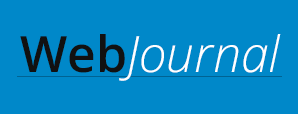
<style>
.page{position:relative;width:298px;height:114px;background:#0088c9}
.page>*{position:absolute;margin:0}
.t1{font:50px "OpenSansLight-Italic";color:#ffffff}
.t2{font:50px "OpenSans-Semibold";color:#111111}
</style>
<div class="page">
<p class="t1" style="left:20px;top:34px;width:261px;height:47px"><span class="t2">Web</span>Journal</p>
</div>
